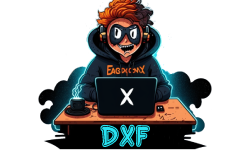
<style>
.page{position:relative;width:250px;height:150px;background:#ffffff}
.page>*{position:absolute;margin:0}
.t1{font:33.1px "SFWonderComicInline";color:#26e3f1}
</style>
<div class="page">
<p class="t1" style="left:100px;top:124px;width:50px;height:24px">DxF</p>
</div>
